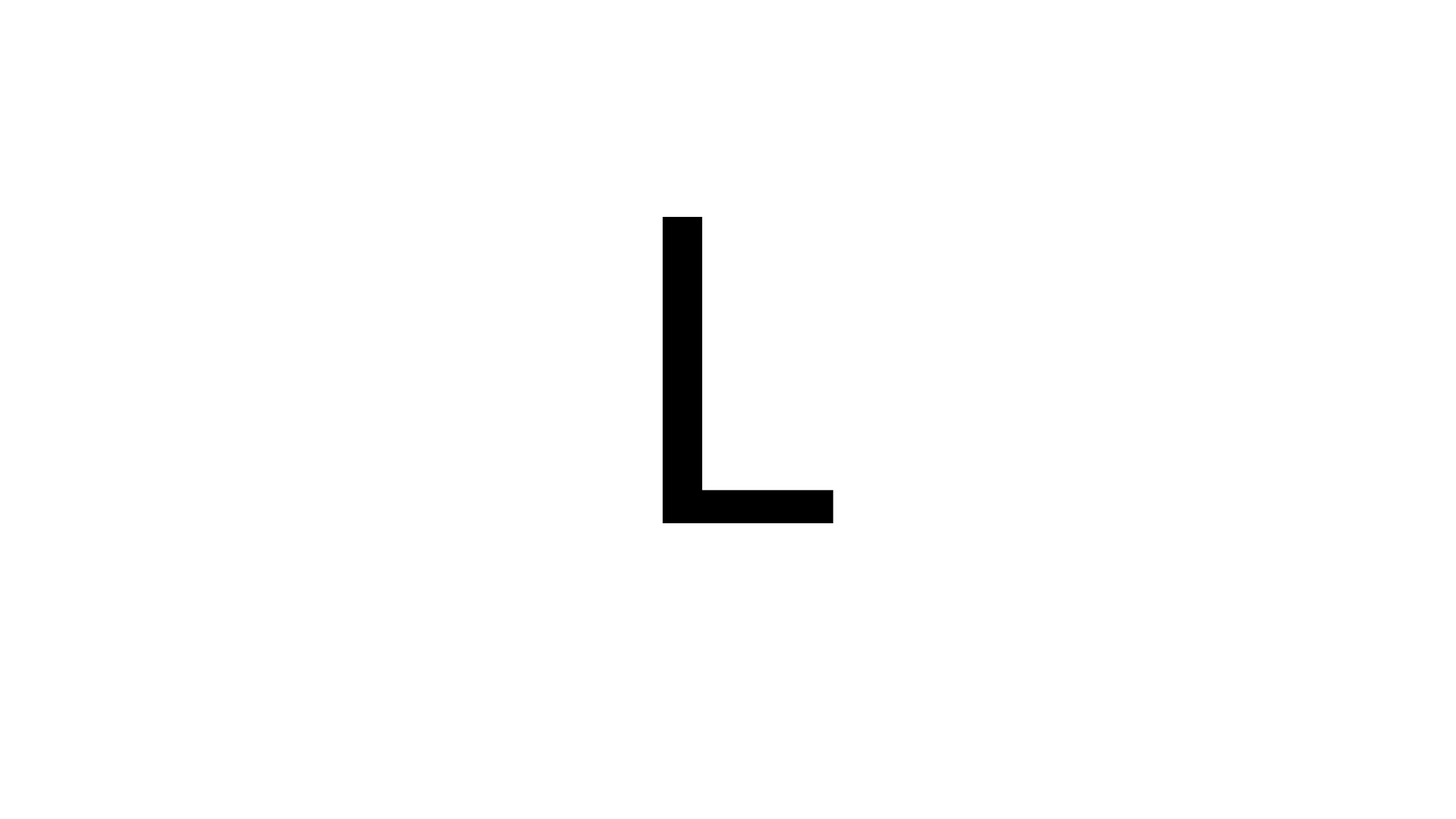
<style>
.page{position:relative;width:1456px;height:819px;background:#ffffff}
.page>*{position:absolute;margin:0}
.t1{font:455px "MyriadPro-Regular";color:#000000}
</style>
<div class="page">
<p class="t1" style="left:662px;top:217px;width:171px;height:306px">L</p>
</div>
